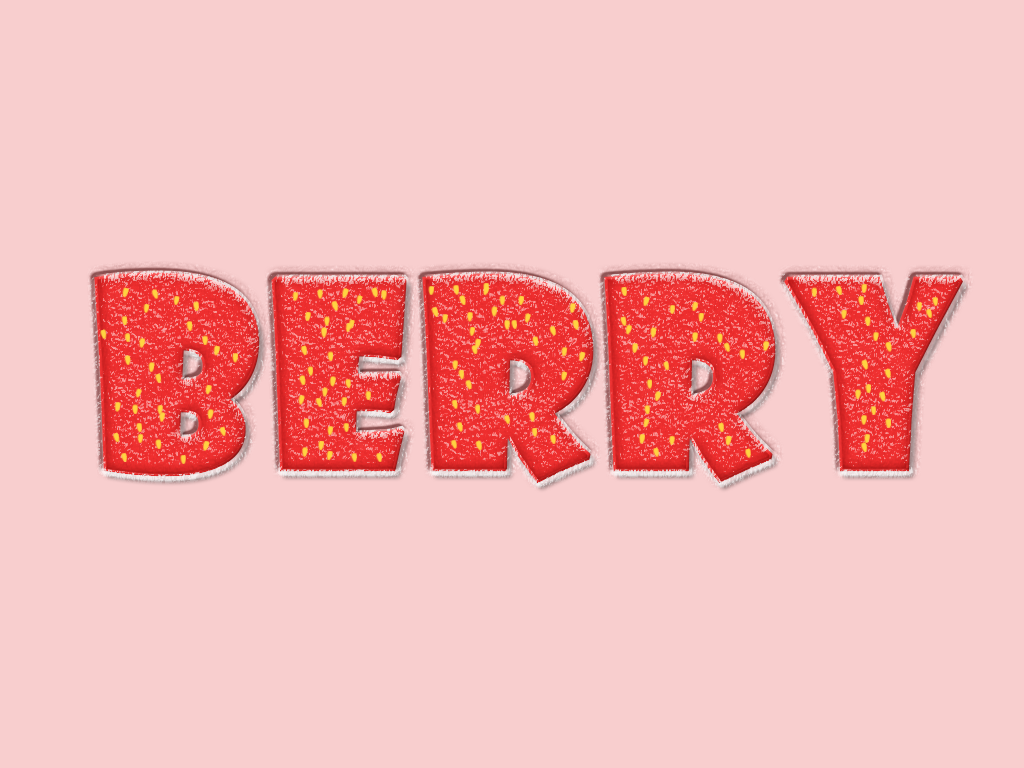
<style>
.page{position:relative;width:1024px;height:768px;background:#f8cece}
.page>*{position:absolute;margin:0}
.t1{font:250px "ShowcardGothic-Reg";letter-spacing:0.02em;color:#f12f2f;font-weight:bold}
.t2{font:250px "ShowcardGothic-Reg";color:#f12f2f;font-weight:bold}
</style>
<div class="page">
<p class="t1" style="left:96px;top:270px;width:869px;height:212px">Berry<span class="t2">y</span></p>
<p class="t1" style="left:96px;top:270px;width:869px;height:212px">Berry<span class="t2">y</span></p>
<p class="t1" style="left:94px;top:272px;width:869px;height:212px">Berry<span class="t2">y</span></p>
</div>
